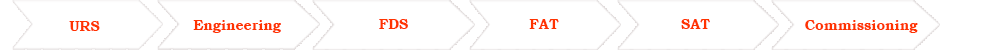
<style>
.page{position:relative;width:981px;height:50px;background:#ffffff}
.page>*{position:absolute;margin:0}
.t1{font:14px "BookmanOldStyle-Bold";color:#ff3300}
</style>
<div class="page">
<p class="t1" style="left:69px;top:21px;width:31px;height:10px">URS</p>
<p class="t1" style="left:193px;top:20px;width:88px;height:13px">Engineering</p>
<p class="t1" style="left:379px;top:19px;width:29px;height:10px">FDS</p>
<p class="t1" style="left:529px;top:19px;width:30px;height:10px">FAT</p>
<p class="t1" style="left:681px;top:19px;width:29px;height:10px">SAT</p>
<p class="t1" style="left:805px;top:20px;width:113px;height:13px">Commissioning</p>
</div>
